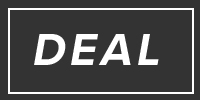
<style>
.page{position:relative;width:200px;height:100px;background:#333333}
.page>*{position:absolute;margin:0}
.t1{font:45.8px "ProximaNova-Bold";letter-spacing:0.1em;color:#ffffff;font-style:italic}
</style>
<div class="page">
<p class="t1" style="left:34px;top:34px;width:125px;height:31px">DEAL</p>
</div>
